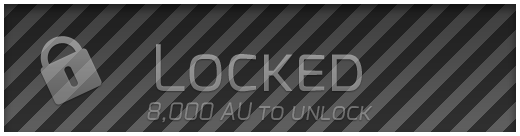
<style>
.page{position:relative;width:520px;height:136px}
.page>*{position:absolute;margin:0}
.t1{font:24px "Exo-Italic";color:#858585;font-variant:small-caps}
.t2{font:64px "Exo-Regular";color:#858585;font-variant:small-caps}
.t3{font:24px "Exo-Italic";color:#858585}
</style>
<div class="page">
<p class="t1" style="left:147px;top:44px;width:226px;height:79px;text-align:center"><span class="t2">Locked<br></span><span class="t3">8,000</span> AU to unlock</p>
</div>
